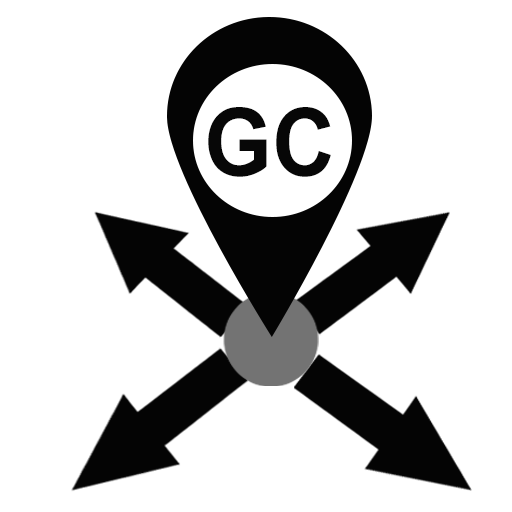
<style>
.page{position:relative;width:512px;height:512px;background:#ffffff}
.page>*{position:absolute;margin:0}
.t1{font:94px "Arial-BoldMT";color:#070707;scale:0.93 1}
</style>
<div class="page">
<p class="t1" style="left:208px;top:107px;width:123px;height:70px">GC</p>
</div>
